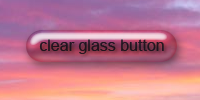
<style>
.page{position:relative;width:200px;height:100px}
.page>*{position:absolute;margin:0}
.t1{font:16px "ArialMT";color:#22131c}
</style>
<div class="page">
<p class="t1" style="left:39px;top:39px;width:125px;height:15px">clear glass button</p>
</div>
